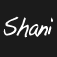
<style>
.page{position:relative;width:57px;height:57px;background:#1b1b1b}
.page>*{position:absolute;margin:0}
.t1{font:25.6px "Handwriting-Dakota";letter-spacing:-0.01em;color:#ffffff;font-weight:bold;scale:0.73 1}
</style>
<div class="page">
<p class="t1" style="left:3px;top:16px;width:50px;height:22px">Shani</p>
</div>
